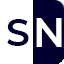
<style>
.page{position:relative;width:64px;height:64px;background:#ffffff}
.page>*{position:absolute;margin:0}
.t1{font:37.9px "Montserrat-SemiBold";color:#02002e}
.t2{font:39.6px "Montserrat-SemiBold";color:#ffffff}
</style>
<div class="page">
<p class="t1" style="left:7px;top:19px;width:22px;height:27px">S</p>
<p class="t2" style="left:36px;top:18px;width:26px;height:29px">N</p>
</div>
